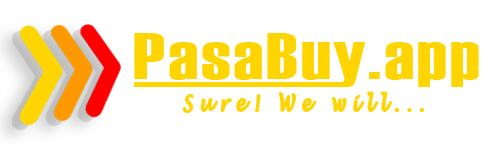
<style>
.page{position:relative;width:500px;height:149px;background:#ffffff}
.page>*{position:absolute;margin:0}
.t1{font:64.9px "Haettenschweiler";letter-spacing:0.03em;color:#fed500;scale:1.3 1}
.t2{font:22.2px "LucidaHandwriting-Italic";letter-spacing:0.4em;color:#fed500;scale:0.77 1}
</style>
<div class="page">
<p class="t1" style="left:134px;top:33px;width:345px;height:54px">PasaBuy.app</p>
<p class="t2" style="left:183px;top:92px;width:241px;height:20px">Sure! We will...</p>
</div>
